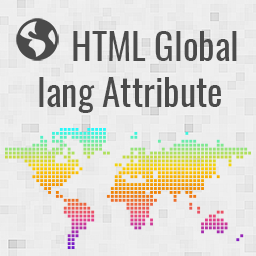
<style>
.page{position:relative;width:256px;height:256px}
.page>*{position:absolute;margin:0}
.t1{font:36.9px/23px "Oswald-Regular";color:#4b4b4b}
</style>
<div class="page">
<p class="t1" style="left:39px;top:31px;width:198px;height:82px">HTML Global<br><br> lang Attribute</p>
</div>
